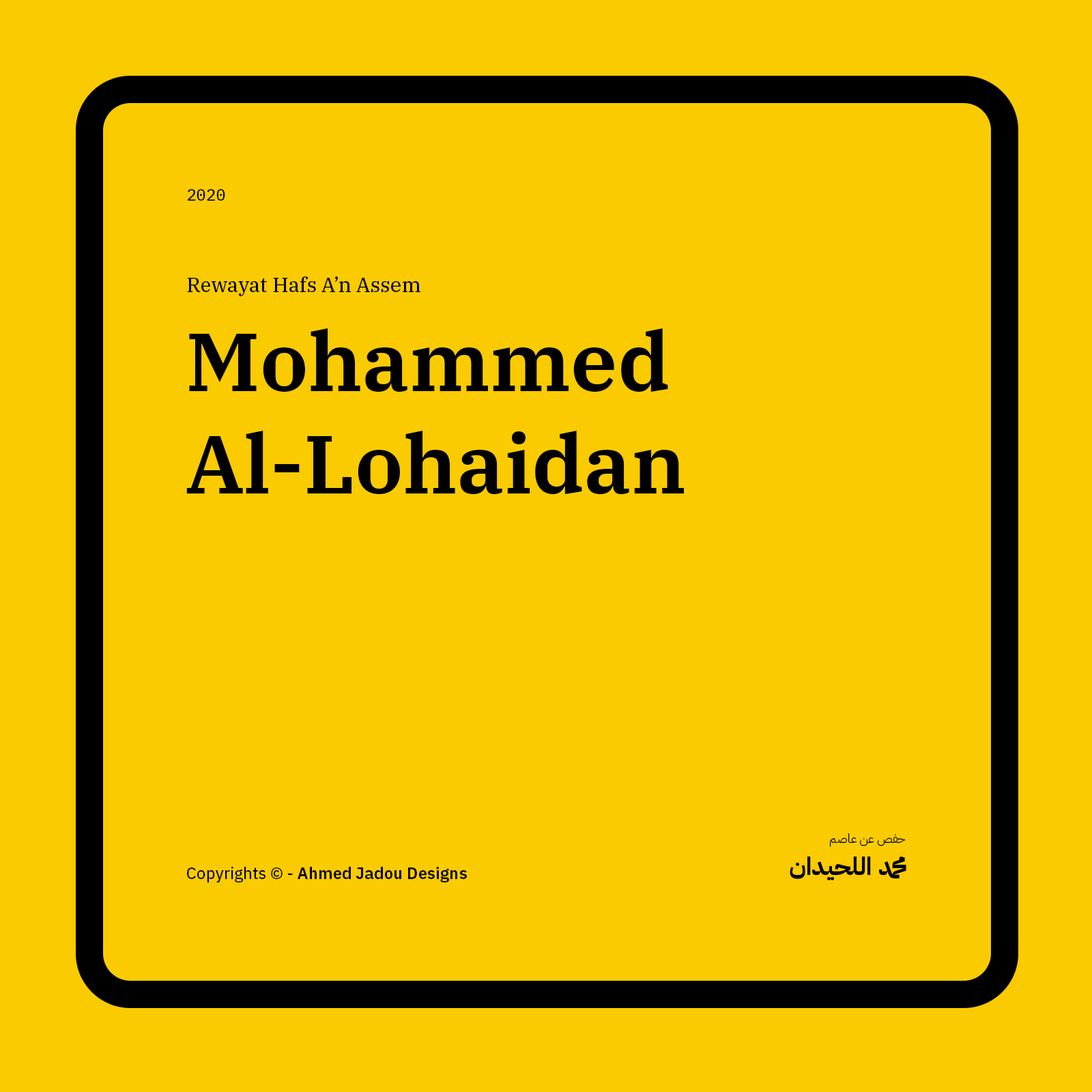
<style>
.page{position:relative;width:1092px;height:1092px;background:#facb00}
.page>*{position:absolute;margin:0}
.t1{font:16.4px "IBMPlexMono-Text";color:#000000}
.t2{font:20.5px "IBMPlexSerif-Text";color:#000000}
.t3{font:81.9px/102.7px "IBMPlexSerif-SemiBold";color:#000000}
.t4{font:12.3px "IBMPlexArabic-Light";color:#000000}
.t5{font:24.6px "IBMPlexArabic-Bold";color:#000000}
.t6{font:16.4px "IBMPlexSans-SemiBold";color:#000000}
.t7{font:16.4px "IBMPlexSans-Text";color:#000000}
</style>
<div class="page">
<p class="t1" style="left:188px;top:189px;width:37px;height:12px">2020</p>
<p class="t2" style="left:187px;top:276px;width:233px;height:20px">Rewayat Hafs A’n Assem</p>
<p class="t3" style="left:186px;top:328px;width:499px;height:166px">Mohammed Al-Lohaidan</p>
<p class="t4" style="left:830px;top:833px;width:76px;height:14px">حفص عن عاصم</p>
<p class="t5" style="left:790px;top:857px;width:116px;height:23px">محمد اللحيدان</p>
<p class="t6" style="left:187px;top:867px;width:280px;height:15px"><span class="t7">Copyrights © - </span>Ahmed Jadou Designs</p>
</div>
